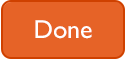
<style>
.page{position:relative;width:126px;height:60px;background:#e66327}
.page>*{position:absolute;margin:0}
.t1{font:26px "GillSans";color:#ffffff}
</style>
<div class="page">
<p class="t1" style="left:35px;top:20px;width:57px;height:19px">Done</p>
</div>
